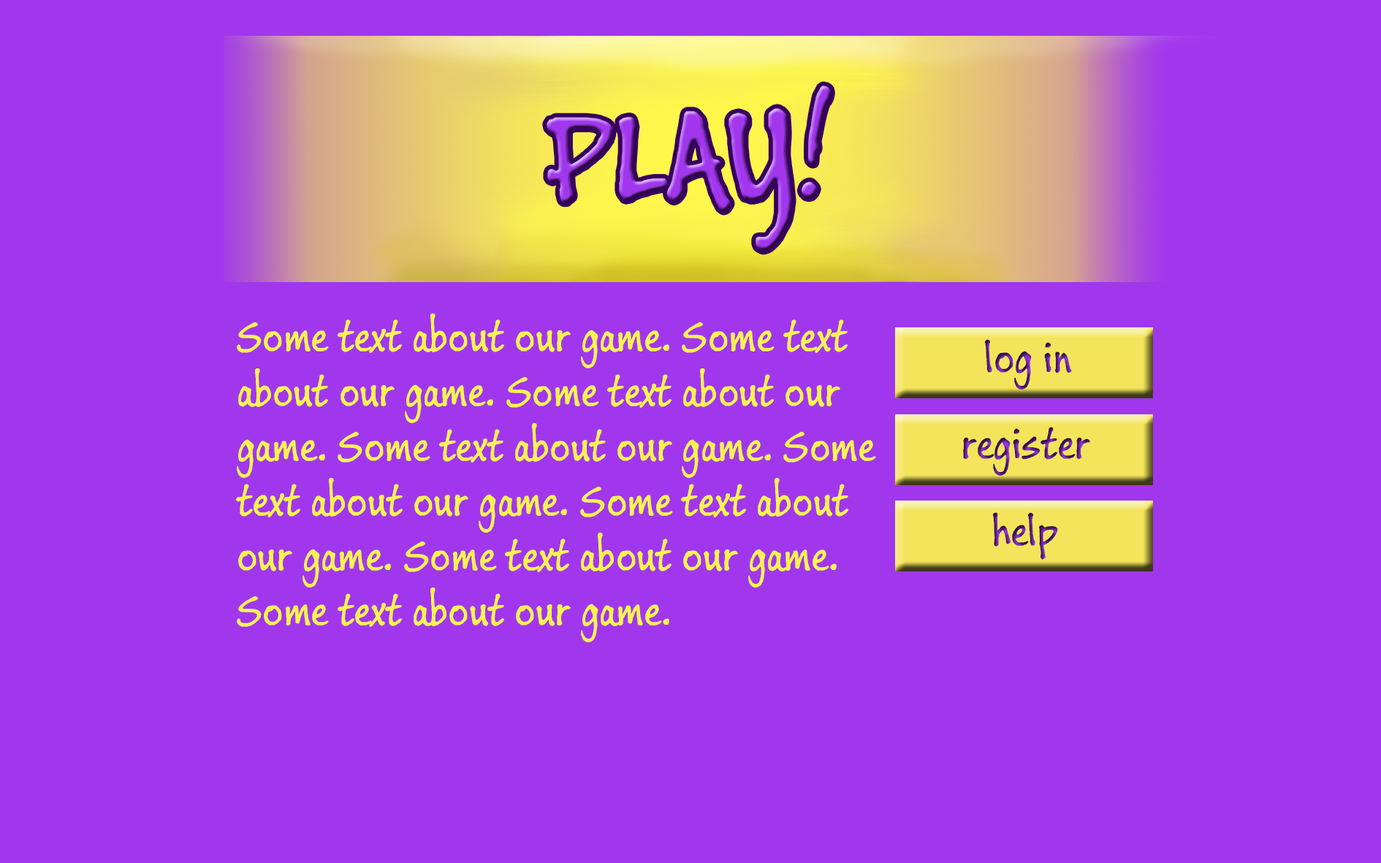
<style>
.page{position:relative;width:1381px;height:863px;background:#a137ec}
.page>*{position:absolute;margin:0}
.t1{font:137px "BuxtonSketch"}
.t2{font:45.7px "BuxtonSketch";color:#fbf34e}
.t3{font:45.7px "BuxtonSketch"}
</style>
<div class="page">
<p class="t1" style="left:547px;top:86px;width:284px;height:165px">PLAY!</p>
<p class="t2" style="left:236px;top:314px;width:640px;height:328px">Some text about our game. Some text about our game. Some text about our game. Some text about our game. Some text about our game. Some text about our game. Some text about our game. Some text about our game.</p>
<p class="t3" style="left:985px;top:339px;width:87px;height:51px">log in</p>
<p class="t3" style="left:963px;top:427px;width:128px;height:49px">register</p>
<p class="t3" style="left:993px;top:512px;width:65px;height:48px">help</p>
</div>
